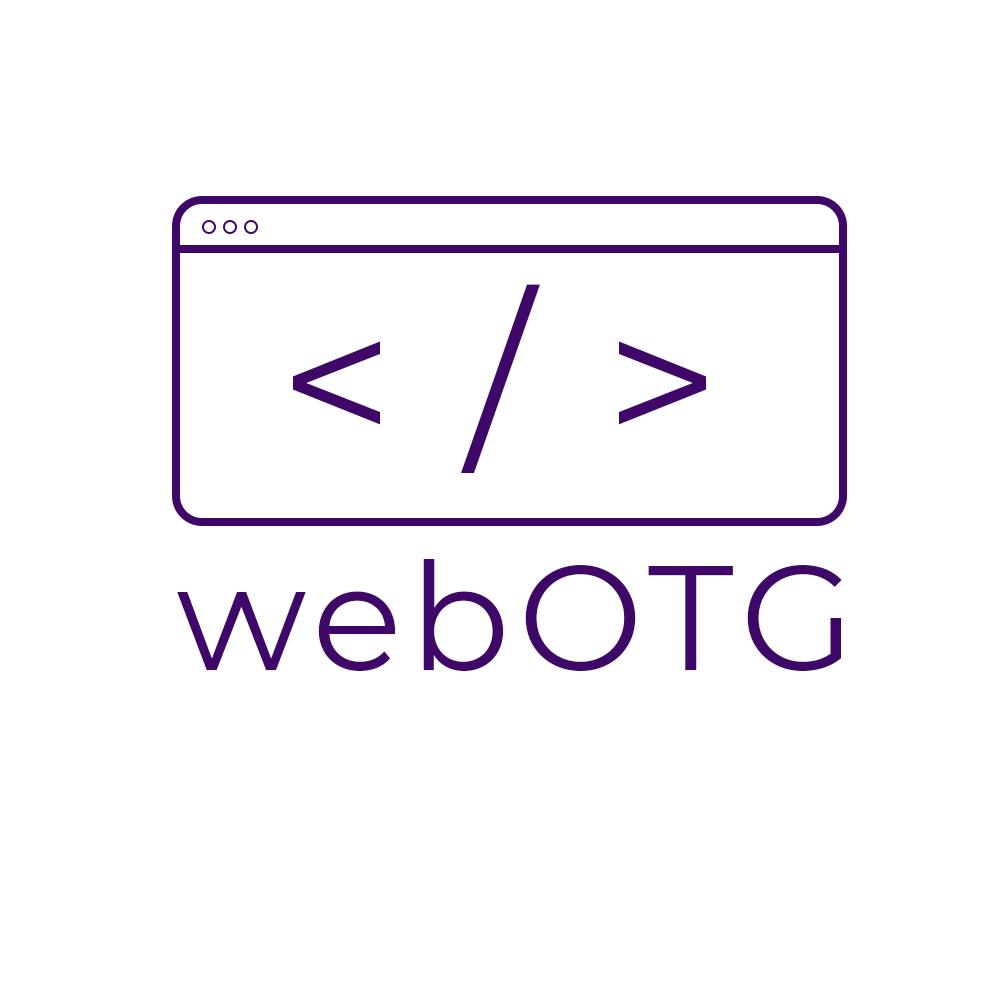
<style>
.page{position:relative;width:1000px;height:1000px;background:#ffffff}
.page>*{position:absolute;margin:0}
.t1{font:200px "Montserrat-Regular";letter-spacing:0.05em;color:#3f0768}
.t2{font:148.9px "Montserrat-Regular";letter-spacing:0.05em;color:#3f0768}
.t3{font:148.9px "Montserrat-Regular";letter-spacing:0.05em;color:#3f0768;text-transform:uppercase}
</style>
<div class="page">
<p class="t1" style="left:293px;top:284px;width:413px;height:189px">&lt; / &gt;</p>
<p class="t2" style="left:177px;top:559px;width:665px;height:112px">web<span class="t3">OTG</span></p>
</div>
